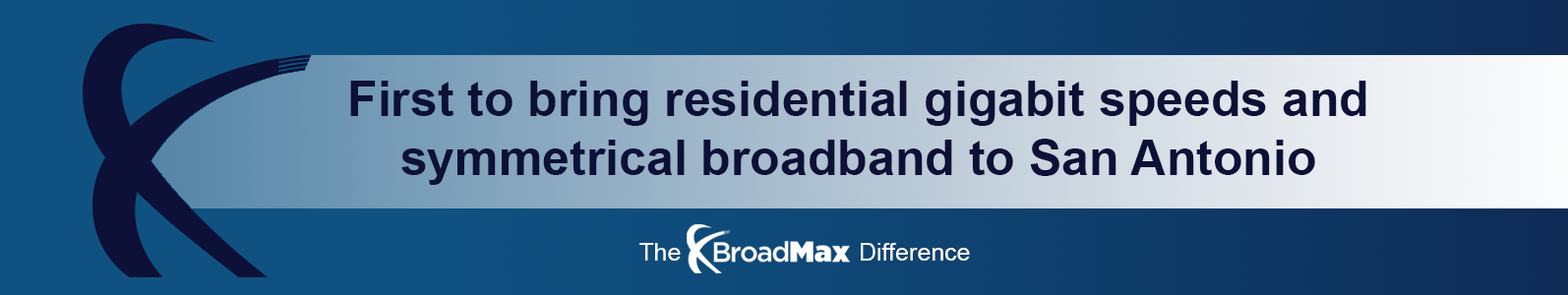
<style>
.page{position:relative;width:1568px;height:295px}
.page>*{position:absolute;margin:0}
.t1{font:49.2px/59px "Arial-BoldMT";color:#0d1037}
.t2{font:24.6px "ArialMT";color:#ffffff}
</style>
<div class="page">
<p class="t1" style="left:350px;top:81px;width:1016px;height:104px;text-align:center">First to bring residential gigabit speeds and symmetrical broadband to San Antonio</p>
<p class="t2" style="left:639px;top:243px;width:331px;height:18px">The                          Difference</p>
</div>
